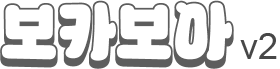
<style>
.page{position:relative;width:280px;height:69px;background:#ffffff}
.page>*{position:absolute;margin:0}
.t1{font:64.4px "KERISKEDUOTF_Line";color:#5d5d5d}
.t2{font:64.4px "KERISKEDUOTF_B";color:#ffffff}
.t3{font:36px "ArialMT";color:#474747}
</style>
<div class="page">
<p class="t1" style="left:0px;top:0px;width:234px;height:69px">보카보아</p>
<p class="t2" style="left:1px;top:2px;width:232px;height:59px">보카보아</p>
<p class="t3" style="left:240px;top:33px;width:37px;height:26px">v2</p>
</div>
